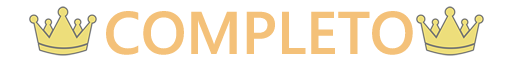
<style>
.page{position:relative;width:512px;height:64px;background:#ffffff}
.page>*{position:absolute;margin:0}
.t1{font:60px "YuGothicUI-Semibold";color:#f4c179}
</style>
<div class="page">
<p class="t1" style="left:106px;top:11px;width:307px;height:44px">COMPLETO</p>
</div>
